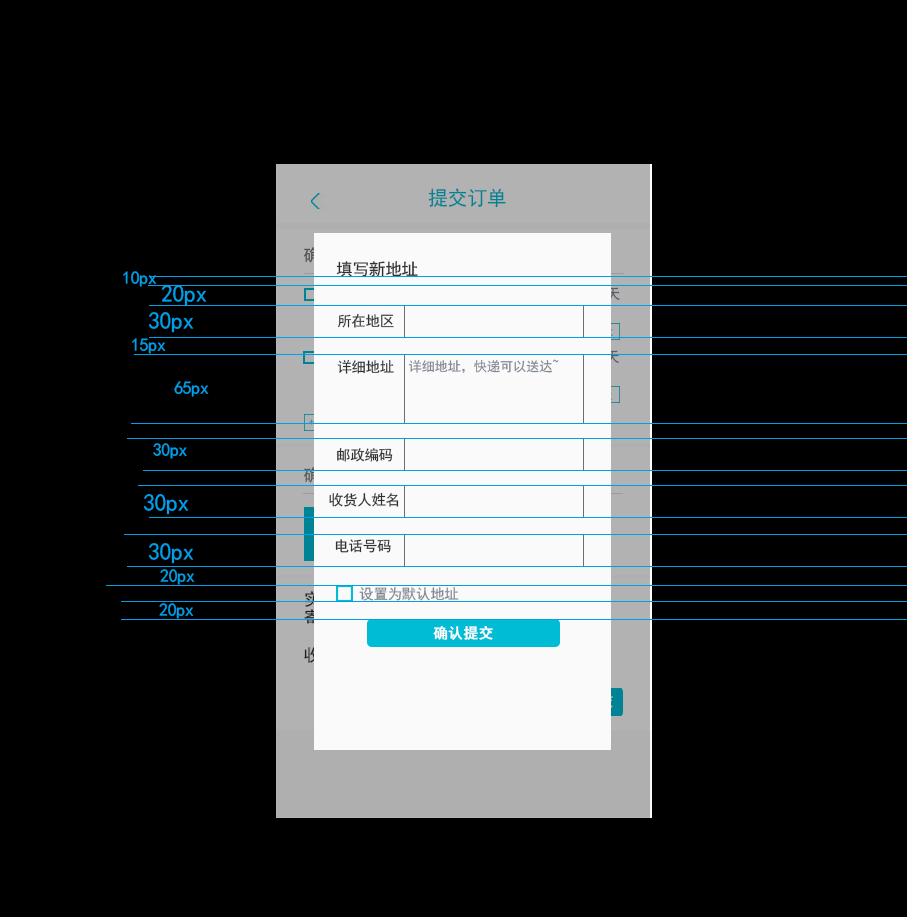
<style>
.page{position:relative;width:907px;height:917px;background:#000000}
.page>*{position:absolute;margin:0}
.t1{font:20px "SimHei";letter-spacing:-0.02em;color:#008394}
.t2{font:16.7px "SimHei";letter-spacing:-0.02em;color:#2e3031}
.t3{font:18px "SimHei";letter-spacing:-0.02em;color:#00a0e9}
.t4{font:24px "SimHei";letter-spacing:-0.02em;color:#00a0e9}
.t5{font:14.4px "SimHei";letter-spacing:-0.02em;color:#2e3031}
.t6{font:13.3px "SimHei";letter-spacing:-0.02em;color:#808792}
.t7{font:14.4px "SimHei";letter-spacing:-0.02em;color:#808792}
.t8{font:14.4px "SimHei";letter-spacing:0.02em;color:#ffffff;font-weight:bold}
</style>
<div class="page">
<p class="t1" style="left:428px;top:188px;width:78px;height:20px">提交订单</p>
<p class="t2" style="left:336px;top:261px;width:82px;height:16px">填写新地址</p>
<p class="t3" style="left:123px;top:271px;width:34px;height:16px">10px</p>
<p class="t4" style="left:161px;top:285px;width:46px;height:21px">20px</p>
<p class="t4" style="left:149px;top:312px;width:45px;height:21px">30px</p>
<p class="t5" style="left:338px;top:314px;width:56px;height:14px">所在地区</p>
<p class="t3" style="left:132px;top:338px;width:34px;height:16px">15px</p>
<p class="t5" style="left:337px;top:360px;width:57px;height:14px">详细地址</p>
<p class="t6" style="left:408px;top:359px;width:151px;height:14px">详细地址，快递可以送达~</p>
<p class="t3" style="left:174px;top:381px;width:35px;height:16px">65px</p>
<p class="t3" style="left:153px;top:443px;width:34px;height:16px">30px</p>
<p class="t5" style="left:337px;top:448px;width:56px;height:14px">邮政编码</p>
<p class="t4" style="left:144px;top:494px;width:45px;height:21px">30px</p>
<p class="t5" style="left:329px;top:492px;width:70px;height:15px">收货人姓名</p>
<p class="t4" style="left:149px;top:543px;width:45px;height:21px">30px</p>
<p class="t5" style="left:335px;top:539px;width:56px;height:14px">电话号码</p>
<p class="t3" style="left:160px;top:569px;width:35px;height:16px">20px</p>
<p class="t7" style="left:359px;top:587px;width:100px;height:14px">设置为默认地址</p>
<p class="t3" style="left:159px;top:603px;width:35px;height:16px">20px</p>
<p class="t8" style="left:433px;top:626px;width:60px;height:14px">确认提交</p>
</div>
